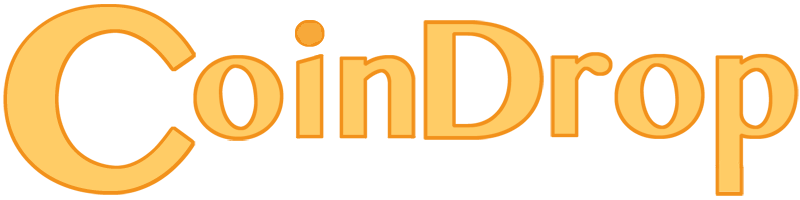
<style>
.page{position:relative;width:800px;height:200px;background:#ffffff}
.page>*{position:absolute;margin:0}
.t1{font:252.5px "OriyaMN-Bold";color:#ffcc66}
.t2{font:149.2px "OriyaMN-Bold";color:#ffcc66}
.t3{font:166.4px "OriyaMN-Bold";color:#ffcc66}
</style>
<div class="page">
<p class="t1" style="left:7px;top:7px;width:185px;height:184px">C</p>
<p class="t2" style="left:195px;top:22px;width:218px;height:117px">oin</p>
<p class="t3" style="left:426px;top:22px;width:116px;height:116px">D</p>
<p class="t2" style="left:553px;top:55px;width:243px;height:112px">rop</p>
</div>
